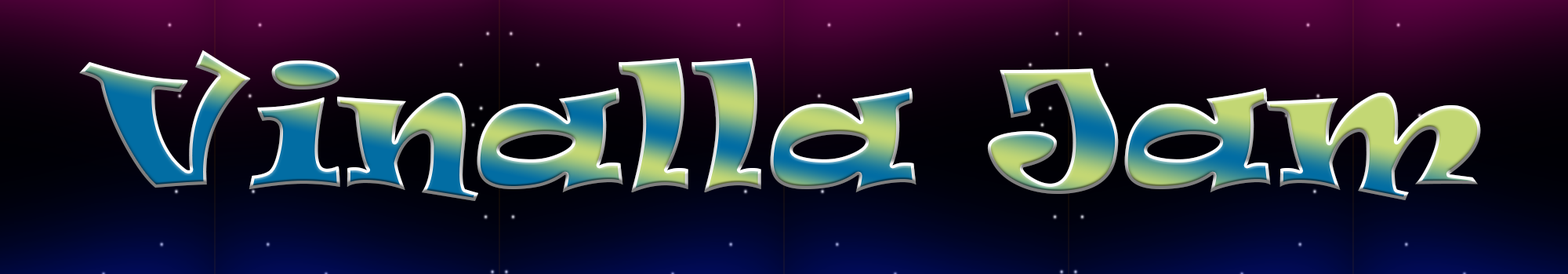
<style>
.page{position:relative;width:1568px;height:274px}
.page>*{position:absolute;margin:0}
.t1{font:156.8px "Ravie";scale:1.13 1}
</style>
<div class="page">
<p class="t1" style="left:79px;top:50px;width:1402px;height:151px">Vinalla Jam</p>
</div>
